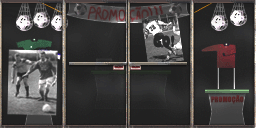
<style>
.page{position:relative;width:256px;height:128px}
.page>*{position:absolute;margin:0}
.t1{font:6.9px "Impact";letter-spacing:-0.03em;color:#582525;text-transform:uppercase;font-weight:bold;scale:1.06 1}
</style>
<div class="page">
<p class="t1" style="left:211px;top:95px;width:33px;height:9px">promoção</p>
</div>
